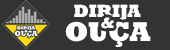
<style>
.page{position:relative;width:170px;height:50px;background:#333333}
.page>*{position:absolute;margin:0}
.t1{font:16.5px "RockwellNovaW07-ExtraBold";color:#ffffff;text-transform:uppercase}
.t2{font:14px "RockwellNovaW07-ExtraBold";color:#ffffff;text-transform:uppercase}
.t3{font:25.6px "RockwellNovaW07-ExtraBold";color:#ffffff;text-transform:uppercase}
</style>
<div class="page">
<p class="t1" style="left:74px;top:4px;width:67px;height:17px">DIRIJA</p>
<p class="t2" style="left:101px;top:17px;width:13px;height:12px">&amp;</p>
<p class="t3" style="left:65px;top:21px;width:86px;height:26px">OUÇA</p>
</div>
